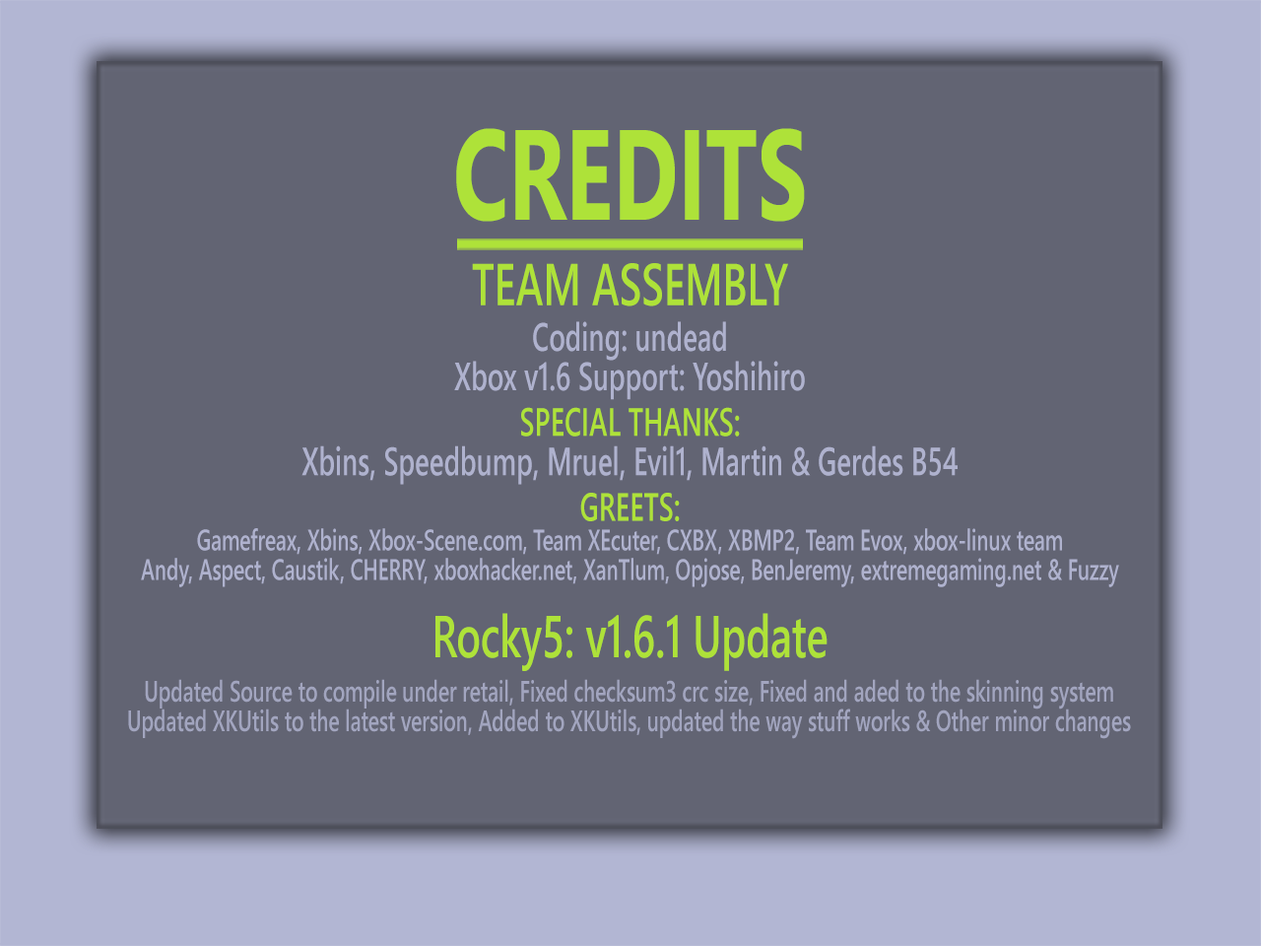
<style>
.page{position:relative;width:1261px;height:946px;background:#626473}
.page>*{position:absolute;margin:0}
.t1{font:128.1px "SegoeUI-Bold";color:#aee239;scale:0.69 1}
.t2{font:59.1px "SegoeUI-Semibold";color:#aee239;scale:0.69 1}
.t3{font:39.4px/39.4px "SegoeUI-Semibold";color:#afb2ce;scale:0.69 1}
.t4{font:39.4px/39.4px "SegoeUI-Semibold";color:#aee239;scale:0.69 1}
.t5{font:29.6px/29.6px "SegoeUI-Semibold";color:#afb2ce;scale:0.69 1}
.t6{font:29.6px/29.6px "SegoeUI-Semibold";color:#a2a5bf;scale:0.69 1}
</style>
<div class="page">
<p class="t1" style="left:456px;top:128px;width:349px;height:94px">CREDITS</p>
<p class="t2" style="left:472px;top:263px;width:316px;height:43px">TEAM ASSEMBLY</p>
<p class="t3" style="left:454px;top:321px;width:351px;height:79px;text-align:center">Coding: undead<br>Xbox v1.6 Support: Yoshihiro</p>
<p class="t3" style="left:301px;top:407px;width:657px;height:78px;text-align:center"><span class="t4">SPECIAL THANKS:<br></span>Xbins, Speedbump, Mruel, Evil1, Martin &amp; Gerdes B54</p>
<p class="t5" style="left:141px;top:493px;width:978px;height:94px;text-align:center"><span class="t4">GREETS:<br></span>Gamefreax, Xbins, Xbox-Scene.com, Team XEcuter, CXBX, XBMP2, Team Evox, xbox-linux team<br>Andy, Aspect, Caustik, CHERRY, xboxhacker.net, XanTlum, Opjose, BenJeremy, extremegaming.net &amp; Fuzzy</p>
<p class="t2" style="left:435px;top:613px;width:392px;height:58px">Rocky5: v1.6.1 Update</p>
<p class="t6" style="left:128px;top:679px;width:1003px;height:60px;text-align:center">Updated Source to compile under retail, Fixed checksum3 crc size, Fixed and aded to the skinning system<br>Updated XKUtils to the latest version, Added to XKUtils, updated the way stuff works &amp; Other minor changes</p>
</div>
